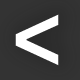
<style>
.page{position:relative;width:80px;height:80px;background:#323232}
.page>*{position:absolute;margin:0}
.t1{font:90.2px "Montserrat-Regular";color:#ffffff;text-transform:uppercase}
</style>
<div class="page">
<p class="t1" style="left:15px;top:14px;width:44px;height:52px">&lt;</p>
</div>
